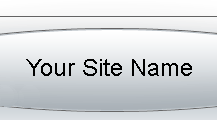
<style>
.page{position:relative;width:217px;height:120px}
.page>*{position:absolute;margin:0}
.t1{font:24px "ArialMT";color:#000000}
</style>
<div class="page">
<p class="t1" style="left:26px;top:59px;width:166px;height:17px">Your Site Name</p>
</div>
